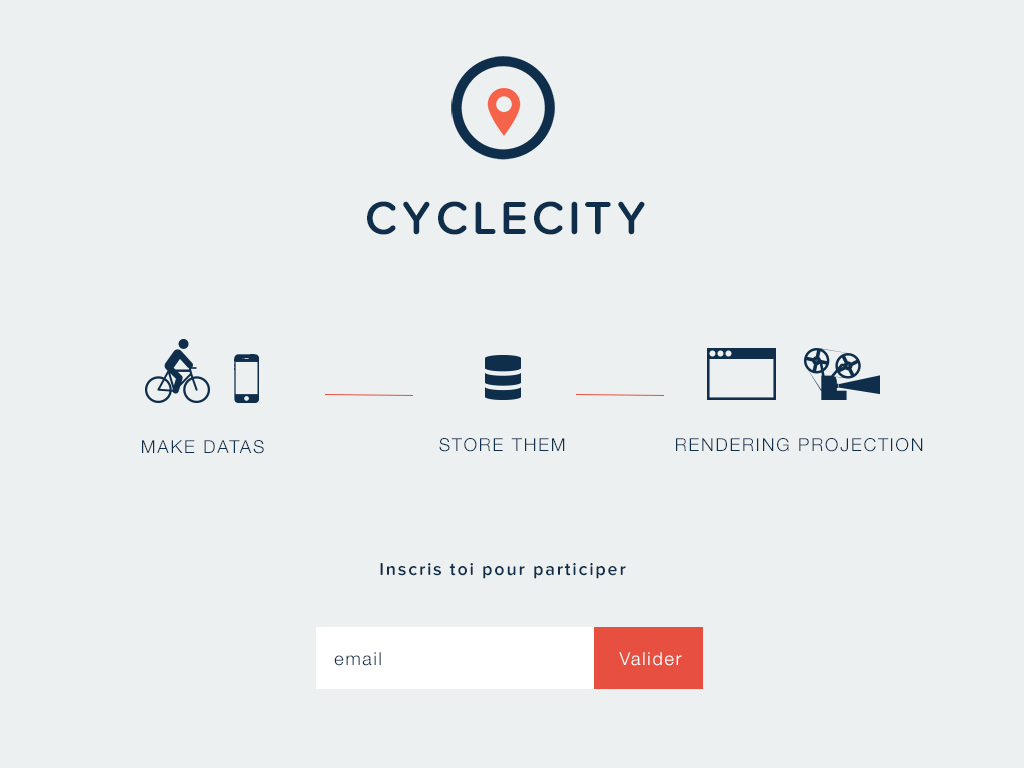
<style>
.page{position:relative;width:1024px;height:768px;background:#ecf0f1}
.page>*{position:absolute;margin:0}
.t1{font:48px "ProximaNovaSoft-Semibold";letter-spacing:0.075em;color:#0f2e4c;text-transform:uppercase}
.t2{font:18px "HelveticaNeue-Light";letter-spacing:0.1em;color:#0f2e4c}
.t3{font:18px "ProximaNovaSoft-Semibold";letter-spacing:0.1em;color:#0f2e4c}
.t4{font:18px "HelveticaNeue-Light";letter-spacing:0.1em;color:#ffffff}
</style>
<div class="page">
<p class="t1" style="left:367px;top:201px;width:278px;height:34px">CYCLECITY</p>
<p class="t2" style="left:439px;top:438px;width:126px;height:14px">STORE THEM</p>
<p class="t2" style="left:676px;top:438px;width:247px;height:14px">RENDERING PROJECTION</p>
<p class="t2" style="left:142px;top:440px;width:122px;height:14px">MAKE DATAS</p>
<p class="t3" style="left:380px;top:563px;width:246px;height:16px">Inscris toi pour participer</p>
<p class="t2" style="left:334px;top:652px;width:47px;height:14px">email</p>
<p class="t4" style="left:619px;top:652px;width:63px;height:14px">Valider</p>
</div>
